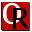
<style>
.page{position:relative;width:32px;height:32px;background:#b60900}
.page>*{position:absolute;margin:0}
.t1{font:33.3px "LucidaConsole";color:#ffffff}
.t2{font:33.3px "LucidaConsole";color:#000000}
</style>
<div class="page">
<p class="t1" style="left:3px;top:3px;width:18px;height:21px">O</p>
<p class="t2" style="left:13px;top:8px;width:17px;height:21px">R</p>
</div>
